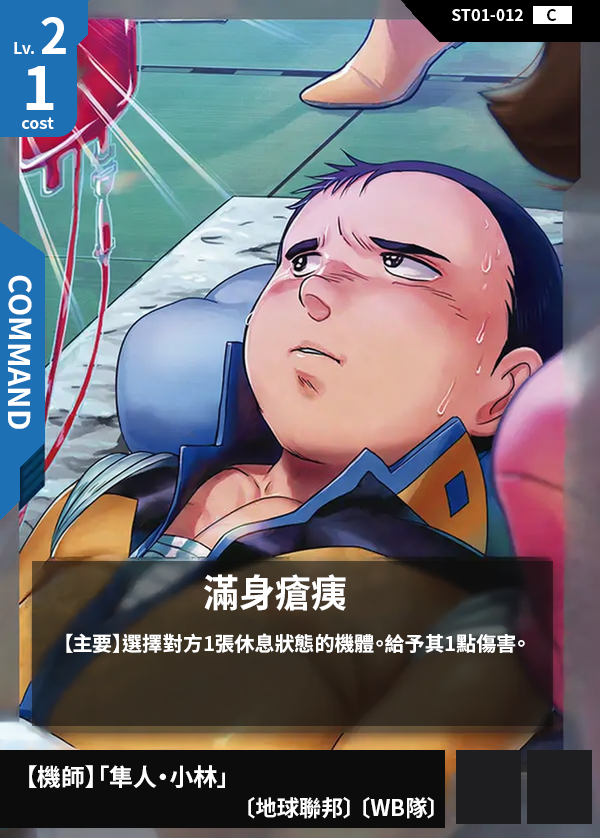
<style>
.page{position:relative;width:600px;height:838px}
.page>*{position:absolute;margin:0}
.t1{font:48px "NotoSansCJKtc-Bold";color:#ffffff}
.t2{font:16px "NotoSansCJKtc-Bold";color:#ffffff}
.t3{font:16px "NotoSansCJKtc-Bold";color:#000000}
.t4{font:60px "NotoSansCJKtc-Bold";color:#ffffff}
.t5{font:30px "NotoSansCJKtc-Bold";color:#ffffff}
.t6{font:38.4px "NotoSansCJKtc-Bold";color:#ffffff;scale:0.94 1}
.t7{font:20px "NotoSansCJKtc-Bold";color:#ffffff}
.t8{font:24px "NotoSansCJKtc-Bold";color:#ffffff}
.t9{font:22px "NotoSansCJKtc-Bold";color:#ffffff}
</style>
<div class="page">
<p class="t1" style="left:41px;top:17px;width:25px;height:37px">2</p>
<p class="t2" style="left:452px;top:9px;width:71px;height:12px">ST01-012</p>
<p class="t3" style="left:547px;top:9px;width:10px;height:12px">C</p>
<p class="t2" style="left:14px;top:42px;width:20px;height:12px">Lv.</p>
<p class="t4" style="left:26px;top:66px;width:28px;height:44px">1</p>
<p class="t2" style="left:22px;top:117px;width:32px;height:12px">cost</p>
<p class="t5" style="left:7px;top:275px;width:25px;height:154px;rotate:90deg">COMMAND</p>
<p class="t6" style="left:204px;top:574px;width:142px;height:37px">滿身瘡痍</p>
<p class="t7" style="left:66px;top:633px;width:459px;height:21px">【主要】選擇對方1張休息狀態的機體。給予其1點傷害。</p>
<p class="t8" style="left:29px;top:765px;width:196px;height:23px">【機師】「隼人・小林」</p>
<p class="t9" style="left:248px;top:797px;width:186px;height:22px">〔地球聯邦〕 〔WB隊〕</p>
</div>
